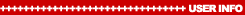
<style>
.page{position:relative;width:245px;height:15px;background:#cc0000}
.page>*{position:absolute;margin:0}
.t1{font:10px "Arial-Black";letter-spacing:-0.08em;color:#ffffff}
</style>
<div class="page">
<p class="t1" style="left:0px;top:4px;width:243px;height:9px">++++++++++++++++++++++++++++++++  USER INFO</p>
</div>
